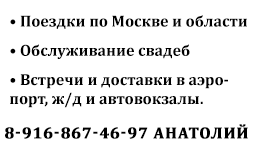
<style>
.page{position:relative;width:255px;height:142px;background:#ffffff}
.page>*{position:absolute;margin:0}
.t1{font:16px "Cambria-Bold";color:#000000}
.t2{font:16px "Cambria-Bold";letter-spacing:0.05em;color:#000000;text-transform:uppercase;font-weight:bold}
</style>
<div class="page">
<p class="t1" style="left:10px;top:15px;width:237px;height:93px">• Поездки по Москве и области<br>• Обслуживание свадеб<br>• Встречи и доставки в аэропорт, ж/д и автовокзалы.</p>
<p class="t2" style="left:5px;top:124px;width:243px;height:15px">8-916-867-46-97 Анатолий</p>
</div>
